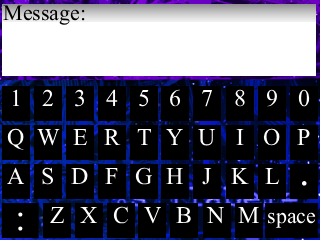
<style>
.page{position:relative;width:320px;height:240px;background:#000000}
.page>*{position:absolute;margin:0}
.t1{font:22px "TimesNewRomanPSMT";color:#000000}
.t2{font:24px "TimesNewRomanPSMT";color:#ffffff}
.t3{font:42px "TimesNewRomanPSMT";color:#ffffff}
.t4{font:38px "TimesNewRomanPSMT";color:#ffffff}
.t5{font:22px "TimesNewRomanPSMT";color:#ffffff}
</style>
<div class="page">
<p class="t1" style="left:3px;top:5px;width:82px;height:20px">Message:</p>
<p class="t2" style="left:12px;top:89px;width:8px;height:17px">1</p>
<p class="t2" style="left:42px;top:89px;width:12px;height:17px">2</p>
<p class="t2" style="left:74px;top:89px;width:11px;height:18px">3</p>
<p class="t2" style="left:106px;top:89px;width:12px;height:17px">4</p>
<p class="t2" style="left:170px;top:89px;width:11px;height:18px">6</p>
<p class="t2" style="left:235px;top:89px;width:10px;height:18px">8</p>
<p class="t2" style="left:266px;top:89px;width:11px;height:18px">9</p>
<p class="t2" style="left:298px;top:89px;width:12px;height:18px">0</p>
<p class="t2" style="left:139px;top:90px;width:10px;height:17px">5</p>
<p class="t2" style="left:201px;top:90px;width:11px;height:17px">7</p>
<p class="t2" style="left:7px;top:128px;width:17px;height:22px">Q</p>
<p class="t2" style="left:37px;top:129px;width:23px;height:17px">W</p>
<p class="t2" style="left:73px;top:129px;width:15px;height:16px">E</p>
<p class="t2" style="left:104px;top:129px;width:17px;height:16px">R</p>
<p class="t2" style="left:137px;top:129px;width:15px;height:16px">T</p>
<p class="t2" style="left:166px;top:129px;width:17px;height:16px">Y</p>
<p class="t2" style="left:198px;top:129px;width:18px;height:17px">U</p>
<p class="t2" style="left:236px;top:129px;width:8px;height:16px">I</p>
<p class="t2" style="left:263px;top:128px;width:17px;height:18px">O</p>
<p class="t2" style="left:297px;top:129px;width:13px;height:16px">P</p>
<p class="t2" style="left:7px;top:167px;width:18px;height:17px">A</p>
<p class="t2" style="left:42px;top:167px;width:12px;height:18px">S</p>
<p class="t2" style="left:71px;top:168px;width:17px;height:16px">D</p>
<p class="t2" style="left:105px;top:168px;width:13px;height:16px">F</p>
<p class="t2" style="left:135px;top:167px;width:17px;height:18px">G</p>
<p class="t2" style="left:166px;top:168px;width:17px;height:16px">H</p>
<p class="t2" style="left:202px;top:168px;width:10px;height:17px">J</p>
<p class="t2" style="left:231px;top:168px;width:18px;height:16px">K</p>
<p class="t2" style="left:265px;top:168px;width:15px;height:16px">L</p>
<p class="t3" style="left:301px;top:181px;width:6px;height:5px">.</p>
<p class="t2" style="left:50px;top:207px;width:14px;height:16px">Z</p>
<p class="t2" style="left:80px;top:207px;width:18px;height:16px">X</p>
<p class="t2" style="left:113px;top:206px;width:16px;height:18px">C</p>
<p class="t2" style="left:144px;top:207px;width:18px;height:17px">V</p>
<p class="t2" style="left:176px;top:207px;width:15px;height:16px">B</p>
<p class="t2" style="left:206px;top:207px;width:18px;height:17px">N</p>
<p class="t2" style="left:238px;top:207px;width:21px;height:16px">M</p>
<p class="t4" style="left:18px;top:212px;width:5px;height:19px">:</p>
<p class="t5" style="left:268px;top:212px;width:48px;height:16px">space</p>
</div>
